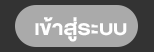
<style>
.page{position:relative;width:154px;height:52px;background:#aaaaaa}
.page>*{position:absolute;margin:0}
.t1{font:30.4px "DBHelvethaicaX-BdExt";color:#ffffff}
</style>
<div class="page">
<p class="t1" style="left:35px;top:17px;width:92px;height:25px">เข้าสู่ระบบ</p>
</div>
